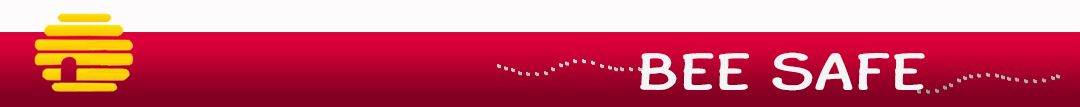
<style>
.page{position:relative;width:1080px;height:107px;background:#fdfbfb}
.page>*{position:absolute;margin:0}
.t1{font:51.9px "FinaleCopyistTextExt";color:#f4f4f4;scale:1.52 1}
</style>
<div class="page">
<p class="t1" style="left:640px;top:52px;width:285px;height:39px">BEE SAFE</p>
</div>
